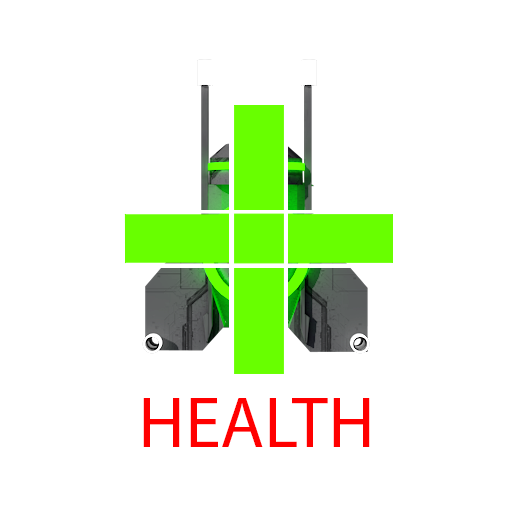
<style>
.page{position:relative;width:512px;height:512px;background:#ffffff}
.page>*{position:absolute;margin:0}
.t1{font:72px "MyriadPro-Regular";color:#ff0000}
</style>
<div class="page">
<p class="t1" style="left:143px;top:398px;width:227px;height:49px">HEALTH</p>
</div>
